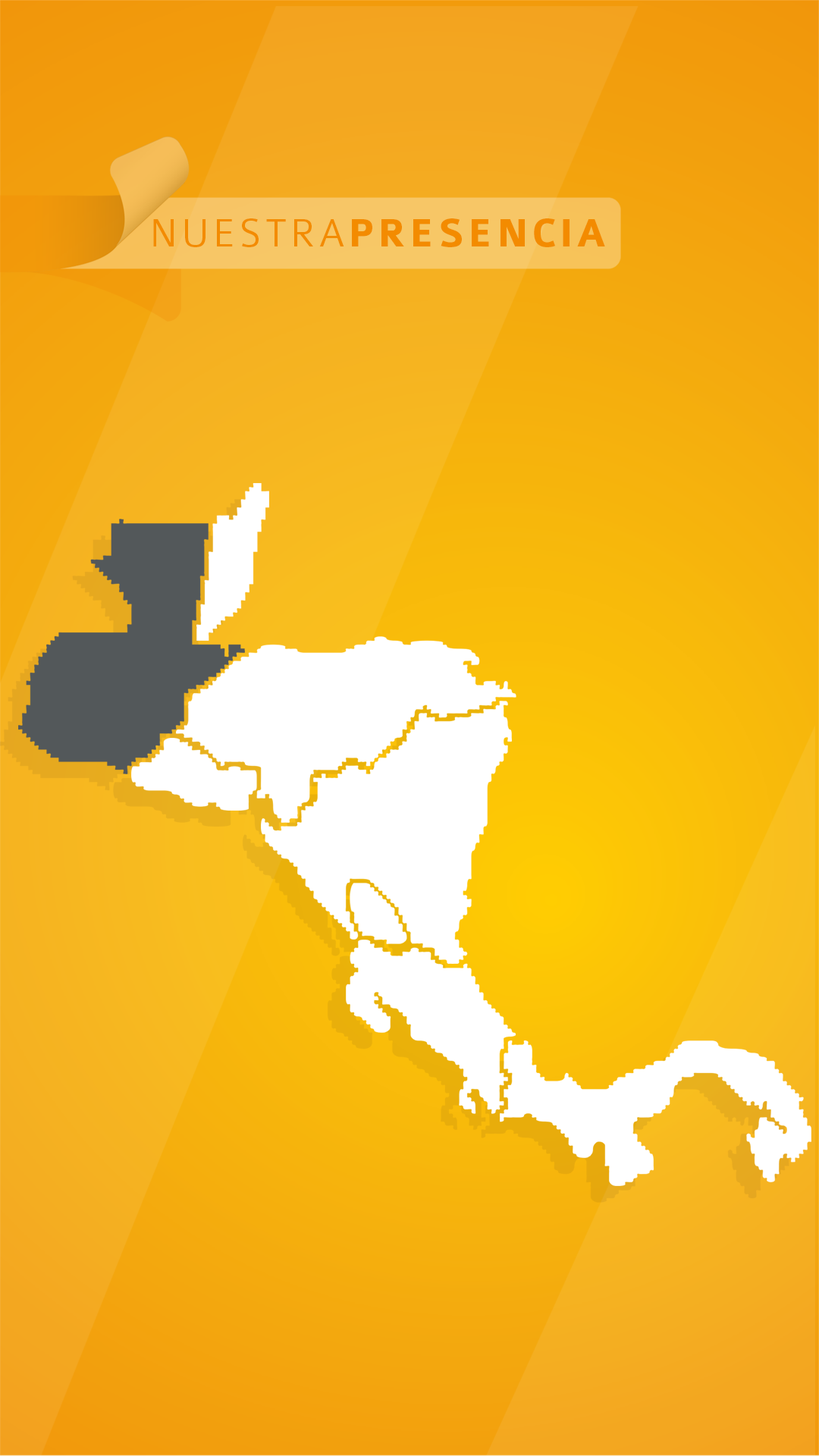
<style>
.page{position:relative;width:819px;height:1456px}
.page>*{position:absolute;margin:0}
.t1{font:42.2px "Colaborate-Bold";letter-spacing:0.08em;color:#f38b00}
.t2{font:42.2px "Colaborate-Light";letter-spacing:0.08em;color:#f38b00}
</style>
<div class="page">
<p class="t1" style="left:153px;top:218px;width:452px;height:29px"><span class="t2">NUESTRA</span>PRESENCIA</p>
</div>
